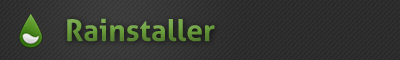
<style>
.page{position:relative;width:400px;height:60px}
.page>*{position:absolute;margin:0}
.t1{font:30px "Aller-Bold";color:#6ba03c}
</style>
<div class="page">
<p class="t1" style="left:67px;top:18px;width:148px;height:24px">Rainstaller</p>
</div>
